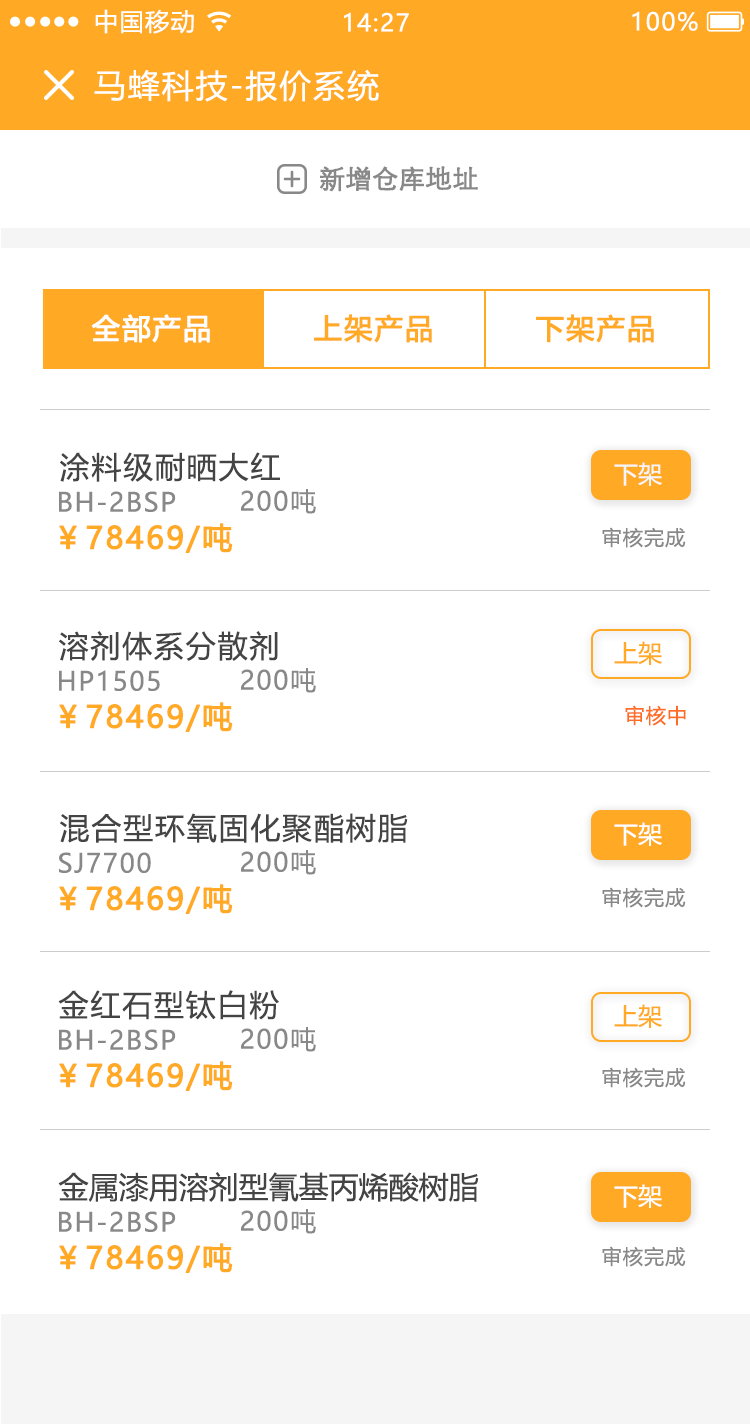
<style>
.page{position:relative;width:750px;height:1424px;background:#ffffff}
.page>*{position:absolute;margin:0}
.t1{font:24px "MicrosoftYaHeiUI";letter-spacing:0.06em;color:#ffffff}
.t2{font:32px "MicrosoftYaHeiUI";letter-spacing:0.06em;color:#ffffff}
.t3{font:26px "STXihei";color:#888888;font-weight:bold}
.t4{font:28px "MicrosoftYaHeiUI";letter-spacing:0.06em;color:#ffffff;font-weight:bold}
.t5{font:28px "MicrosoftYaHeiUI";letter-spacing:0.06em;color:#ffa924;font-weight:bold}
.t6{font:30px "MicrosoftYaHeiUI";letter-spacing:0.06em;color:#444444}
.t7{font:24px "MicrosoftYaHeiUI";color:#f5f5f5}
.t8{font:26px "MicrosoftYaHeiUI";letter-spacing:0.06em;color:#888888}
.t9{font:30px "MicrosoftYaHeiUI";letter-spacing:0.06em;color:#ffa924;font-weight:bold}
.t10{font:20px "MicrosoftYaHeiUI";letter-spacing:0.06em;color:#888888}
.t11{font:24px "MicrosoftYaHeiUI";color:#ffa924}
.t12{font:20px "MicrosoftYaHeiUI";letter-spacing:0.06em;color:#ff6c24}
.t13{font:24px "MicrosoftYaHeiUI";color:#ffffff}
.t14{font:30px "MicrosoftYaHeiUI";color:#444444}
</style>
<div class="page">
<p class="t1" style="left:95px;top:9px;width:99px;height:25px">中国移动</p>
<p class="t1" style="left:344px;top:12px;width:65px;height:20px">14:27</p>
<p class="t1" style="left:632px;top:11px;width:66px;height:20px">100%</p>
<p class="t2" style="left:94px;top:69px;width:285px;height:33px">马蜂科技-报价系统</p>
<p class="t3" style="left:320px;top:166px;width:158px;height:26px">新增仓库地址</p>
<p class="t4" style="left:91px;top:314px;width:119px;height:29px">全部产品</p>
<p class="t5" style="left:314px;top:314px;width:118px;height:29px">上架产品</p>
<p class="t5" style="left:536px;top:314px;width:118px;height:29px">下架产品</p>
<p class="t6" style="left:60px;top:452px;width:220px;height:30px">涂料级耐晒大红</p>
<p class="t7" style="left:614px;top:462px;width:48px;height:24px">下架</p>
<p class="t8" style="left:59px;top:491px;width:117px;height:21px">BH-2BSP</p>
<p class="t8" style="left:241px;top:489px;width:75px;height:25px">200吨</p>
<p class="t9" style="left:59px;top:523px;width:174px;height:30px">￥78469/吨</p>
<p class="t10" style="left:602px;top:527px;width:84px;height:21px">审核完成</p>
<p class="t6" style="left:59px;top:631px;width:219px;height:30px">溶剂体系分散剂</p>
<p class="t11" style="left:614px;top:641px;width:48px;height:24px">上架</p>
<p class="t8" style="left:59px;top:670px;width:101px;height:21px">HP1505</p>
<p class="t8" style="left:241px;top:668px;width:75px;height:25px">200吨</p>
<p class="t9" style="left:59px;top:702px;width:174px;height:30px">￥78469/吨</p>
<p class="t12" style="left:625px;top:705px;width:61px;height:21px">审核中</p>
<p class="t6" style="left:60px;top:813px;width:348px;height:30px">混合型环氧固化聚酯树脂</p>
<p class="t13" style="left:614px;top:822px;width:48px;height:24px">下架</p>
<p class="t8" style="left:59px;top:852px;width:92px;height:21px">SJ7700</p>
<p class="t8" style="left:241px;top:850px;width:75px;height:25px">200吨</p>
<p class="t9" style="left:59px;top:884px;width:174px;height:30px">￥78469/吨</p>
<p class="t10" style="left:602px;top:887px;width:84px;height:21px">审核完成</p>
<p class="t6" style="left:58px;top:990px;width:221px;height:30px">金红石型钛白粉</p>
<p class="t11" style="left:614px;top:1004px;width:48px;height:24px">上架</p>
<p class="t8" style="left:59px;top:1029px;width:117px;height:21px">BH-2BSP</p>
<p class="t8" style="left:241px;top:1027px;width:75px;height:25px">200吨</p>
<p class="t9" style="left:59px;top:1061px;width:174px;height:30px">￥78469/吨</p>
<p class="t10" style="left:602px;top:1067px;width:84px;height:21px">审核完成</p>
<p class="t14" style="left:58px;top:1172px;width:421px;height:30px">金属漆用溶剂型氰基丙烯酸树脂</p>
<p class="t13" style="left:614px;top:1184px;width:48px;height:24px">下架</p>
<p class="t8" style="left:59px;top:1211px;width:117px;height:21px">BH-2BSP</p>
<p class="t8" style="left:241px;top:1209px;width:75px;height:25px">200吨</p>
<p class="t9" style="left:59px;top:1243px;width:174px;height:30px">￥78469/吨</p>
<p class="t10" style="left:602px;top:1246px;width:84px;height:21px">审核完成</p>
</div>
